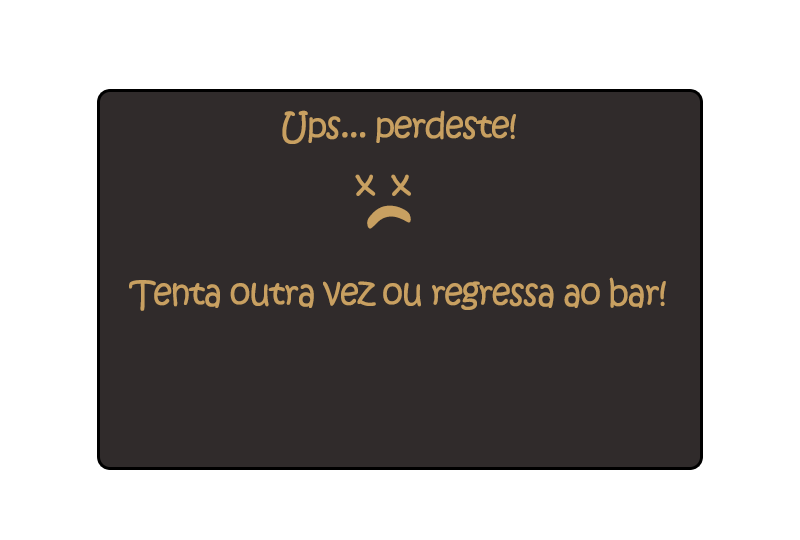
<style>
.page{position:relative;width:800px;height:540px;background:#302b2b}
.page>*{position:absolute;margin:0}
.t1{font:60.2px "KristenITC-Regular";letter-spacing:-0.06em;color:#c8a061;font-weight:bold;scale:0.94 1}
.t2{font:60.4px "KristenITC-Regular";letter-spacing:-0.06em;color:#c8a061;font-weight:bold;scale:0.94 1}
.t3{font:96.7px "KristenITC-Regular";letter-spacing:-0.06em;color:#c8a061;font-weight:bold;scale:2.09 1}
</style>
<div class="page">
<p class="t1" style="left:282px;top:110px;width:234px;height:34px">Ups... perdeste!</p>
<p class="t2" style="left:355px;top:174px;width:56px;height:22px">x  x</p>
<p class="t3" style="left:367px;top:205px;width:44px;height:24px;rotate:-98deg">)</p>
<p class="t1" style="left:129px;top:277px;width:537px;height:34px">Tenta outra vez ou regressa ao bar!</p>
</div>
